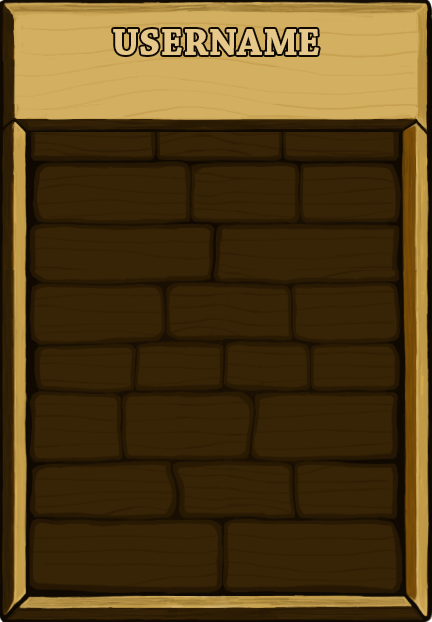
<style>
.page{position:relative;width:432px;height:622px;background:#372305}
.page>*{position:absolute;margin:0}
.t1{font:39.5px "ChaparralPro-Bold";color:#e6c98a}
</style>
<div class="page">
<p class="t1" style="left:113px;top:29px;width:206px;height:26px">USERNAME</p>
</div>
